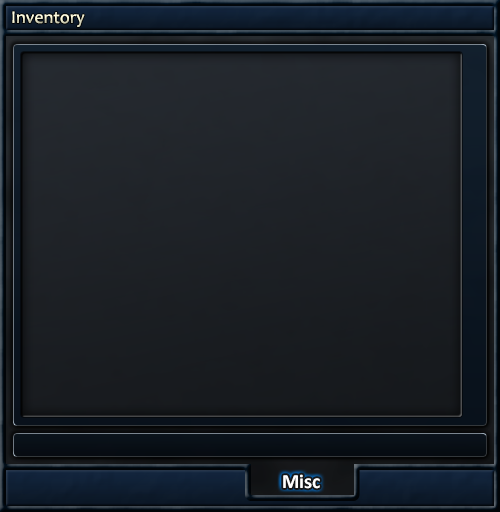
<style>
.page{position:relative;width:500px;height:512px}
.page>*{position:absolute;margin:0}
.t1{font:18px "Candara";color:#fefcdd}
.t2{font:20px "Calibri-Bold";color:#ffffff}
</style>
<div class="page">
<p class="t1" style="left:12px;top:11px;width:73px;height:16px">Inventory</p>
<p class="t2" style="left:283px;top:474px;width:37px;height:15px">Misc</p>
</div>
